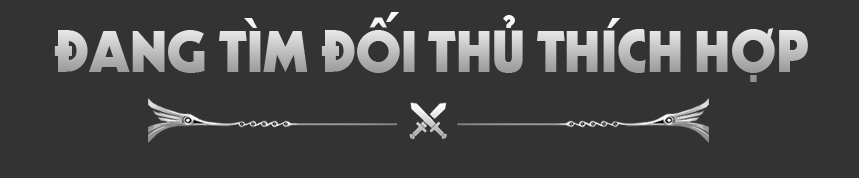
<style>
.page{position:relative;width:859px;height:178px;background:#333333}
.page>*{position:absolute;margin:0}
.t1{font:72px "SVN-Internation"}
</style>
<div class="page">
<p class="t1" style="left:54px;top:12px;width:754px;height:70px">ĐANG TÌM ĐỐI THỦ THÍCH HỢP</p>
</div>
